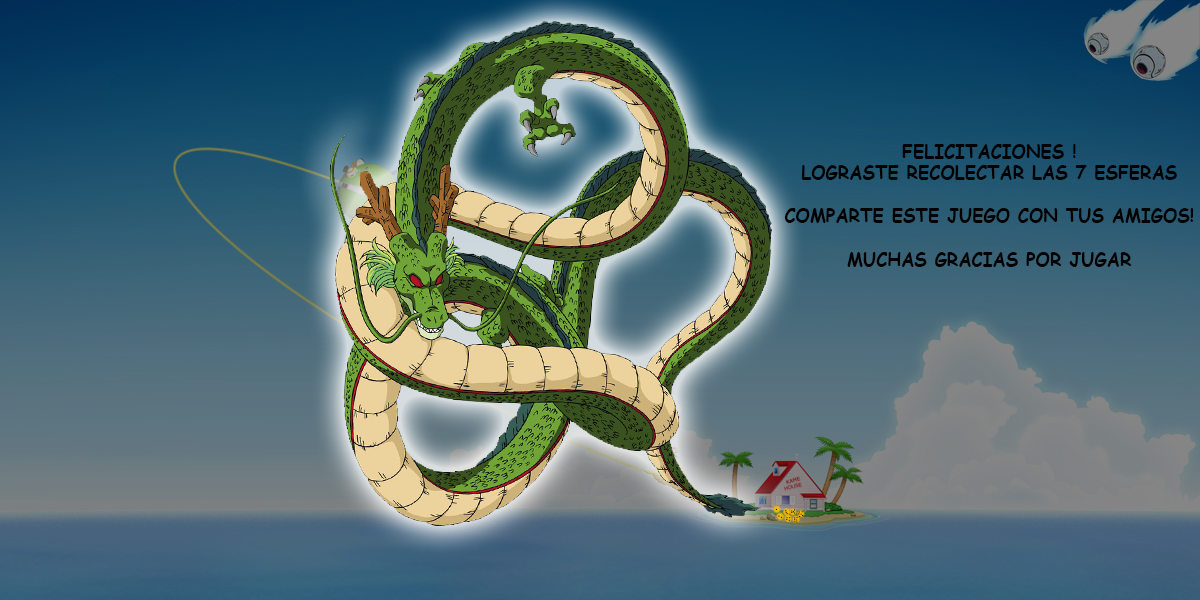
<style>
.page{position:relative;width:1200px;height:600px}
.page>*{position:absolute;margin:0}
.t1{font:18px "ComicSansMS-Bold";color:#000000}
</style>
<div class="page">
<p class="t1" style="left:784px;top:144px;width:409px;height:123px;text-align:center">FELICITACIONES !<br>LOGRASTE RECOLECTAR LAS 7 ESFERAS<br><br>COMPARTE ESTE JUEGO CON TUS AMIGOS!<br><br>MUCHAS GRACIAS POR JUGAR</p>
</div>
